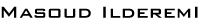
<style>
.page{position:relative;width:200px;height:25px;background:#ffffff}
.page>*{position:absolute;margin:0}
.t1{font:21.5px "BankGothicBT-Medium";color:#000000}
</style>
<div class="page">
<p class="t1" style="left:1px;top:6px;width:197px;height:12px">Masoud IlderemI</p>
</div>
